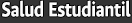
<style>
.page{position:relative;width:132px;height:23px;background:#333333}
.page>*{position:absolute;margin:0}
.t1{font:22.3px "AncizarSans-Bold";color:#fcfcfc;scale:0.85 1}
</style>
<div class="page">
<p class="t1" style="left:2px;top:0px;width:129px;height:17px">Salud Estudiantil</p>
</div>
